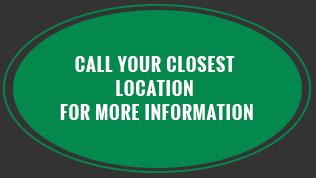
<style>
.page{position:relative;width:316px;height:178px;background:#03884e}
.page>*{position:absolute;margin:0}
.t1{font:18px/24px "Oswald-Bold";letter-spacing:0.05em;color:#ffffff;text-transform:uppercase}
</style>
<div class="page">
<p class="t1" style="left:60px;top:56px;width:193px;height:64px;text-align:center">Call your closest <br>location <br>for more information</p>
</div>
